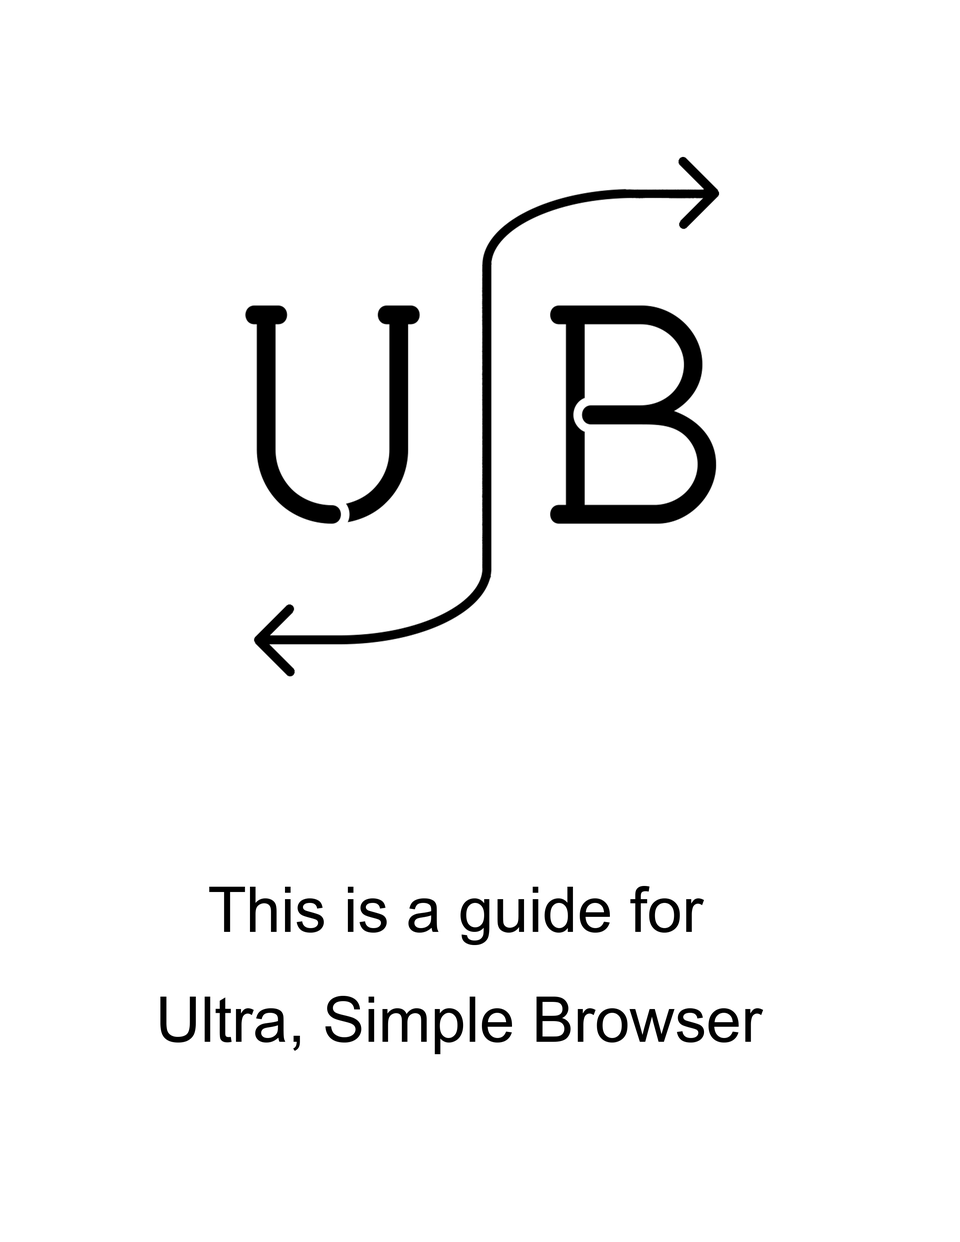
<style>
.page{position:relative;width:960px;height:1242px;background:#ffffff}
.page>*{position:absolute;margin:0}
.t1{font:62.7px "ArialMT";color:#000000}
</style>
<div class="page">
<p class="t1" style="left:160px;top:886px;width:603px;height:168px">This is a guide for<br>Ultra, Simple Browser</p>
</div>
